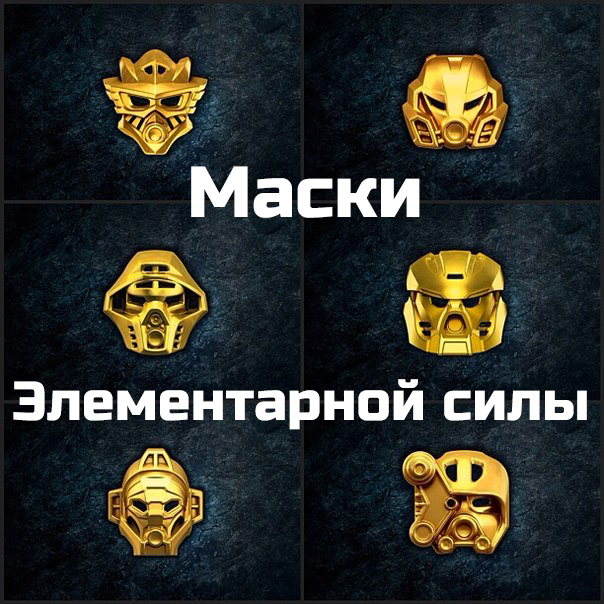
<style>
.page{position:relative;width:604px;height:604px}
.page>*{position:absolute;margin:0}
.t1{font:72px "RussoOne-Regular";color:#ffffff}
.t2{font:55px "RussoOne-Regular";color:#ffffff}
</style>
<div class="page">
<p class="t1" style="left:191px;top:166px;width:229px;height:52px">Маски</p>
<p class="t2" style="left:13px;top:379px;width:574px;height:51px">Элементарной силы</p>
</div>
